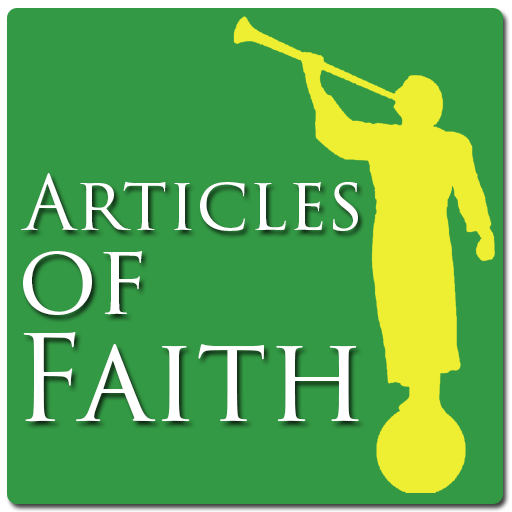
<style>
.page{position:relative;width:512px;height:512px;background:#339944}
.page>*{position:absolute;margin:0}
.t1{font:74.3px "TrajanPro3-Regular";color:#ffffff}
.t2{font:97.8px "TrajanPro3-Regular";color:#ffffff}
.t3{font:117.4px "TrajanPro3-Regular";color:#ffffff}
</style>
<div class="page">
<p class="t1" style="left:21px;top:173px;width:337px;height:58px">Articles</p>
<p class="t2" style="left:23px;top:251px;width:120px;height:64px">of</p>
<p class="t3" style="left:23px;top:332px;width:336px;height:90px">Faith</p>
</div>
